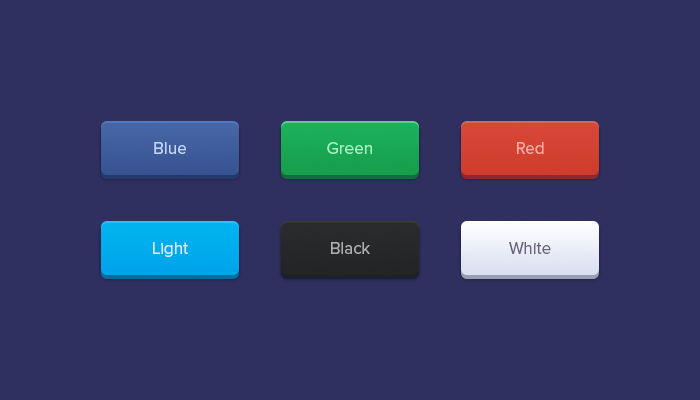
<style>
.page{position:relative;width:700px;height:400px;background:#2f3060}
.page>*{position:absolute;margin:0}
.t1{font:17.3px "ProximaNova-Regular";color:#c6d8ff}
.t2{font:17.3px "ProximaNova-Regular";color:#a4f7c6}
.t3{font:17.3px "ProximaNova-Regular";color:#ffaea5}
.t4{font:17.3px "ProximaNova-Regular";color:#d6f2fe}
.t5{font:17.3px "ProximaNova-Regular";color:#b0b0b0}
.t6{font:17.3px "ProximaNova-Regular";color:#69607b}
</style>
<div class="page">
<p class="t1" style="left:154px;top:142px;width:32px;height:12px">Blue</p>
<p class="t2" style="left:327px;top:142px;width:45px;height:12px">Green</p>
<p class="t3" style="left:517px;top:142px;width:27px;height:12px">Red</p>
<p class="t4" style="left:153px;top:242px;width:35px;height:15px">Light</p>
<p class="t5" style="left:331px;top:242px;width:39px;height:12px">Black</p>
<p class="t6" style="left:509px;top:242px;width:42px;height:12px">White</p>
</div>
